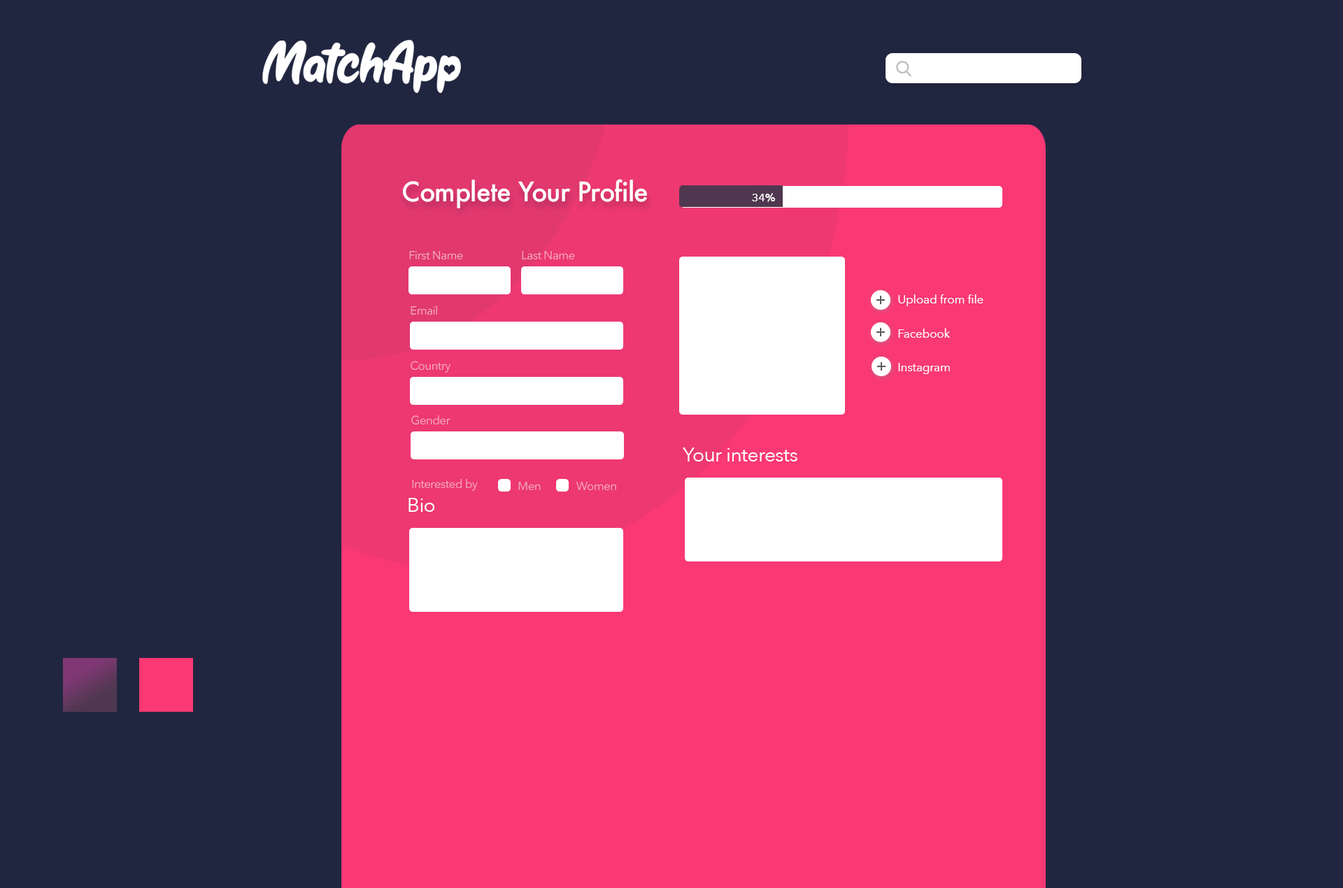
<style>
.page{position:relative;width:1343px;height:888px;background:#212640}
.page>*{position:absolute;margin:0}
.t1{font:26.2px "Futura-Medium";letter-spacing:-0.025em;color:#ffffff}
.t2{font:11.5px "AvenirNext-Medium";letter-spacing:-0.01em;color:#ffffff}
.t3{font:11.5px "AvenirNext-DemiBold";letter-spacing:-0.01em;color:#ffffff}
.t4{font:11.7px "AvenirNext-Regular";letter-spacing:-0.025em;color:#f0acbf}
.t5{font:11.7px "AvenirNext-Regular";letter-spacing:-0.025em;color:#f6acbf}
.t6{font:11.7px "AvenirNext-Regular";color:#ffffff}
.t7{font:19.8px "AvenirNext-Regular";letter-spacing:-0.025em;color:#ffffff}
</style>
<div class="page">
<p class="t1" style="left:403px;top:179px;width:244px;height:29px">Complete Your Profile</p>
<p class="t2" style="left:752px;top:193px;width:23px;height:9px">34<span class="t3">%</span></p>
<p class="t4" style="left:409px;top:251px;width:54px;height:8px">First Name</p>
<p class="t5" style="left:522px;top:251px;width:53px;height:8px">Last Name</p>
<p class="t4" style="left:410px;top:306px;width:27px;height:9px">Email</p>
<p class="t6" style="left:898px;top:294px;width:85px;height:12px">Upload from file</p>
<p class="t6" style="left:898px;top:328px;width:52px;height:10px">Facebook</p>
<p class="t5" style="left:410px;top:361px;width:41px;height:12px">Country</p>
<p class="t6" style="left:898px;top:363px;width:52px;height:11px">Instagram</p>
<p class="t5" style="left:411px;top:415px;width:39px;height:9px">Gender</p>
<p class="t7" style="left:683px;top:448px;width:114px;height:14px">Your interests</p>
<p class="t5" style="left:412px;top:479px;width:66px;height:12px">Interested by</p>
<p class="t5" style="left:518px;top:482px;width:23px;height:8px">Men</p>
<p class="t5" style="left:576px;top:482px;width:40px;height:8px">Women</p>
<p class="t7" style="left:408px;top:498px;width:27px;height:14px">Bio</p>
</div>
